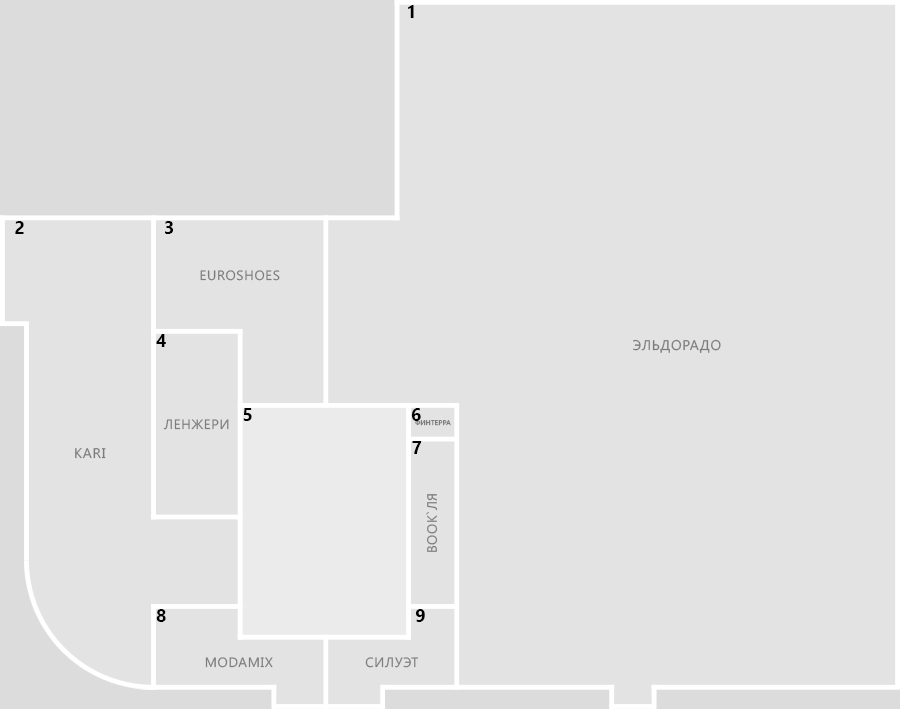
<style>
.page{position:relative;width:900px;height:709px;background:#e3e3e3}
.page>*{position:absolute;margin:0}
.t1{font:18px "SegoeUI-Bold";letter-spacing:0.05em;color:#000000;text-transform:uppercase}
.t2{font:13.5px "SegoeUI";letter-spacing:0.05em;color:#7c7c7c;text-transform:uppercase}
.t3{font:14px "SegoeUI";letter-spacing:0.05em;color:#7c7c7c;text-transform:uppercase}
.t4{font:6.7px "SegoeUI";letter-spacing:0.05em;color:#7c7c7c;text-transform:uppercase}
</style>
<div class="page">
<p class="t1" style="left:408px;top:5px;width:6px;height:13px">1</p>
<p class="t1" style="left:15px;top:221px;width:9px;height:13px">2</p>
<p class="t1" style="left:165px;top:221px;width:8px;height:13px">3</p>
<p class="t2" style="left:200px;top:270px;width:80px;height:11px">Euroshoes</p>
<p class="t1" style="left:156px;top:334px;width:10px;height:13px">4</p>
<p class="t3" style="left:633px;top:339px;width:88px;height:14px">Эльдорадо</p>
<p class="t1" style="left:243px;top:408px;width:9px;height:13px">5</p>
<p class="t1" style="left:411px;top:408px;width:10px;height:13px">6</p>
<p class="t2" style="left:163px;top:419px;width:66px;height:11px">Ленжери</p>
<p class="t4" style="left:415px;top:420px;width:36px;height:6px">Финтерра</p>
<p class="t3" style="left:75px;top:448px;width:31px;height:11px">Kari</p>
<p class="t1" style="left:412px;top:441px;width:10px;height:13px">7</p>
<p class="t2" style="left:426px;top:494px;width:12px;height:58px;rotate:-90deg">Book`ля</p>
<p class="t1" style="left:156px;top:609px;width:10px;height:13px">8</p>
<p class="t1" style="left:415px;top:609px;width:10px;height:13px">9</p>
<p class="t2" style="left:205px;top:657px;width:68px;height:11px">Modamix</p>
<p class="t2" style="left:365px;top:657px;width:54px;height:11px">Силуэт</p>
</div>
